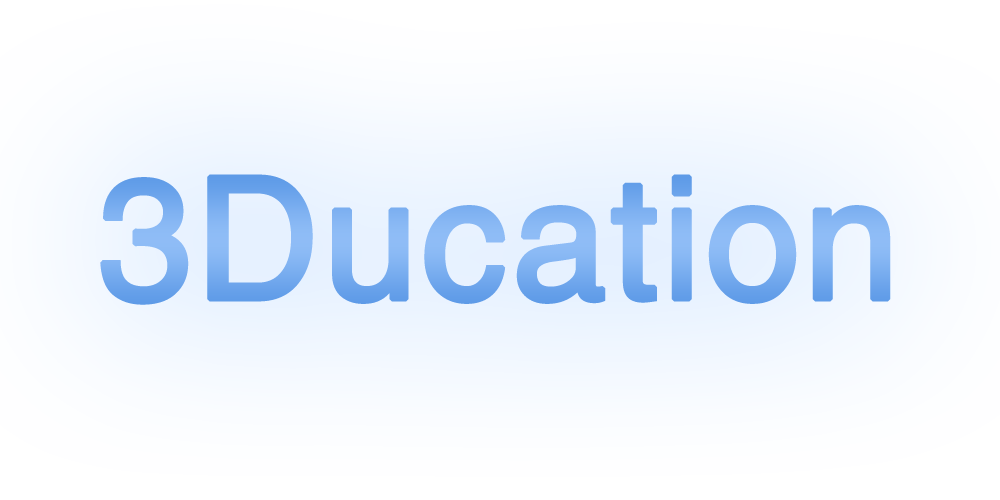
<style>
.page{position:relative;width:1000px;height:500px}
.page>*{position:absolute;margin:0}
.t1{font:170px "HelveticaWorld-Regular";color:#7db0f1;font-weight:bold}
</style>
<div class="page">
<p class="t1" style="left:100px;top:174px;width:791px;height:131px">3Ducation</p>
</div>
